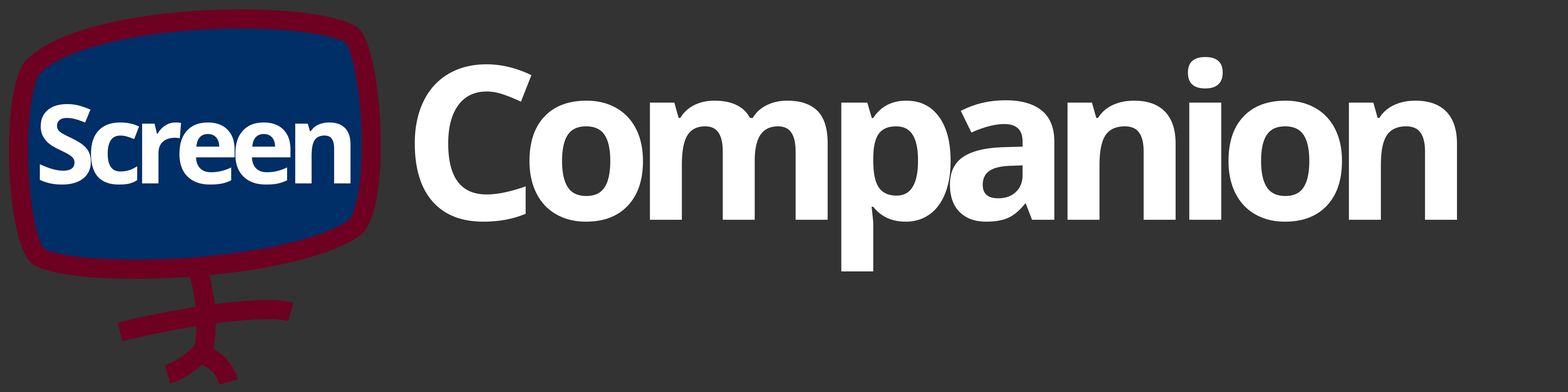
<style>
.page{position:relative;width:1568px;height:392px;background:#333333}
.page>*{position:absolute;margin:0}
.t1{font:214.4px "OpenSans-Bold";letter-spacing:-0.09em;color:#ffffff}
.t2{font:109.5px "OpenSans-Bold";letter-spacing:-0.08em;color:#ffffff}
</style>
<div class="page">
<p class="t1" style="left:415px;top:57px;width:1042px;height:214px">Companion</p>
<p class="t2" style="left:40px;top:104px;width:311px;height:81px">Screen</p>
</div>
